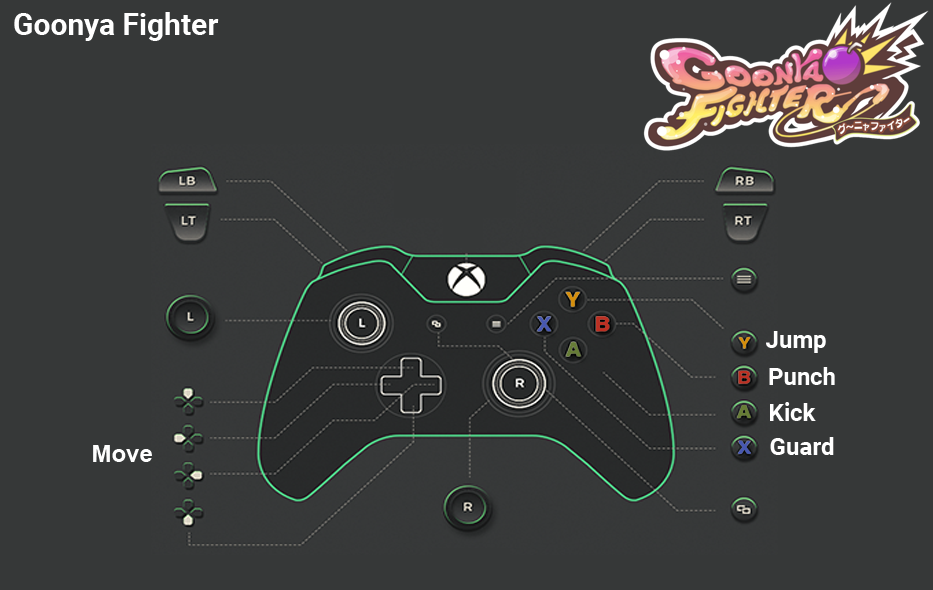
<style>
.page{position:relative;width:933px;height:590px;background:#363838}
.page>*{position:absolute;margin:0}
.t1{font:30px "Roboto-Bold";color:#ffffff}
.t2{font:24px "Roboto-Bold";color:#ffffff}
.t3{font:24px "Arial-BoldMT";color:#fefefe}
</style>
<div class="page">
<p class="t1" style="left:14px;top:12px;width:205px;height:29px">Goonya Fighter</p>
<p class="t2" style="left:766px;top:331px;width:60px;height:22px">Jump</p>
<p class="t2" style="left:769px;top:367px;width:66px;height:18px">Punch</p>
<p class="t2" style="left:770px;top:402px;width:46px;height:19px">Kick</p>
<p class="t2" style="left:770px;top:437px;width:64px;height:18px">Guard</p>
<p class="t3" style="left:93px;top:445px;width:59px;height:17px">Move</p>
</div>
